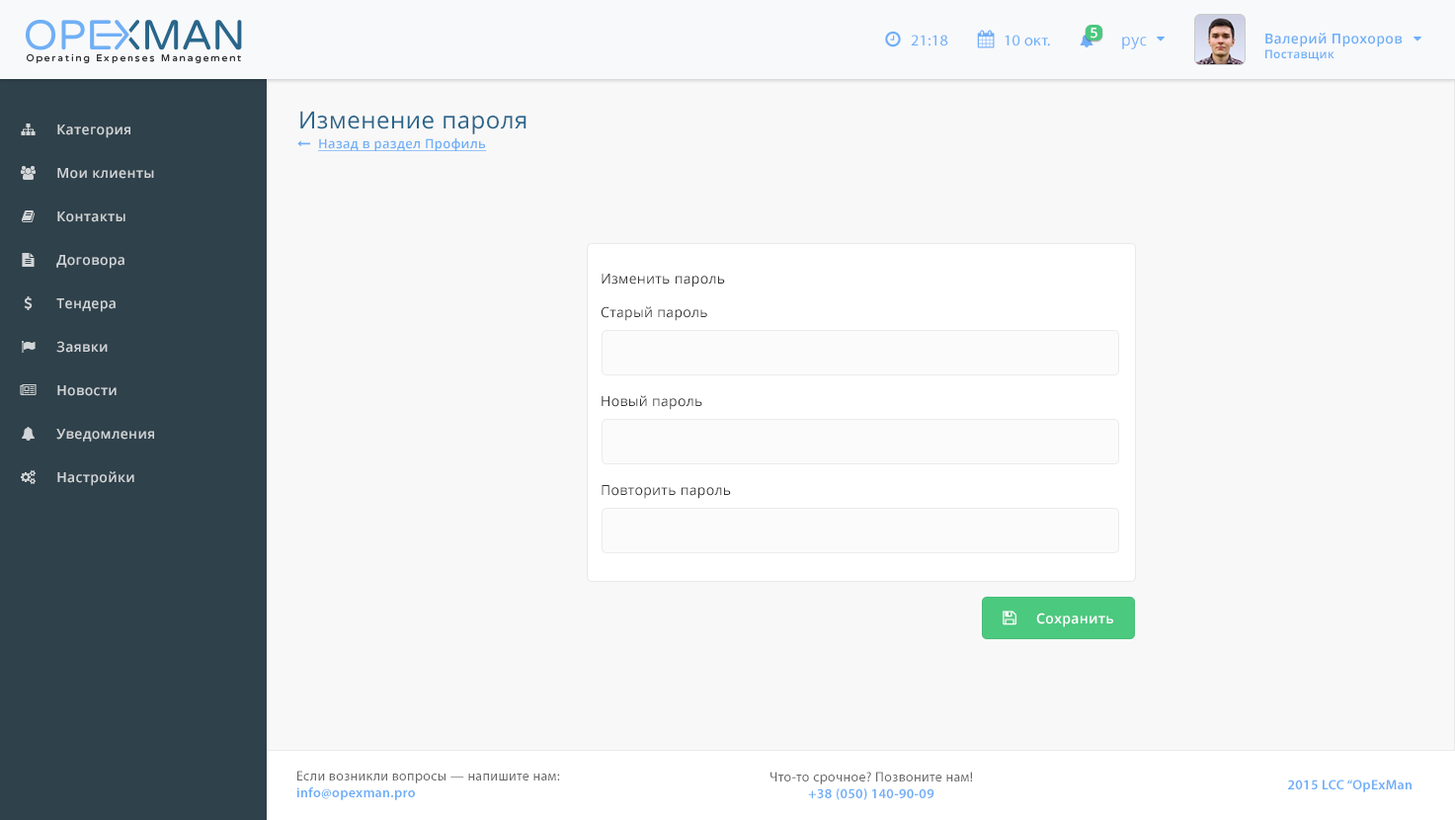
<style>
.page{position:relative;width:1455px;height:820px;background:#f8f8f8}
.page>*{position:absolute;margin:0}
.t1{font:13.8px "OpenSans-Semibold";letter-spacing:0.025em;color:#ffffff}
.t2{font:15.7px "MyriadPro-Regular";letter-spacing:0.025em;color:#6faff8}
.t3{font:15.7px "OpenSans";letter-spacing:0.025em;color:#6eaff8}
.t4{font:13.8px "OpenSans-Semibold";letter-spacing:0.025em;color:#6eaef7}
.t5{font:11.8px "OpenSans-Semibold";letter-spacing:0.025em;color:#6eaef7}
.t6{font:23.6px "OpenSans";letter-spacing:0.025em;color:#29658b}
.t7{font:13.8px "OpenSans-Semibold";letter-spacing:0.025em;color:#d2d5d7}
.t8{font:12.8px "OpenSans-Semibold";letter-spacing:0.025em;color:#6faff8;text-decoration:underline}
.t9{font:13.8px "OpenSans";letter-spacing:0.025em;color:#333333}
.t10{font:13.8px "MyriadPro-Regular";letter-spacing:0.025em;color:#696969}
.t11{font:13.8px "MyriadPro-Semibold";letter-spacing:0.025em;color:#6eaef8}
</style>
<div class="page">
<p class="t1" style="left:1090px;top:28px;width:7px;height:11px">5</p>
<p class="t2" style="left:911px;top:35px;width:37px;height:11px">21:18</p>
<p class="t2" style="left:1004px;top:35px;width:46px;height:11px">10 окт.</p>
<p class="t3" style="left:1122px;top:37px;width:25px;height:12px">рус</p>
<p class="t4" style="left:1265px;top:33px;width:137px;height:28px">Валерий Прохоров<br><span class="t5">Поставщик</span></p>
<p class="t6" style="left:300px;top:111px;width:226px;height:23px">Изменение пароля</p>
<p class="t7" style="left:57px;top:124px;width:73px;height:14px">Категория</p>
<p class="t8" style="left:318px;top:138px;width:169px;height:13px">Назад в раздел Профиль</p>
<p class="t7" style="left:57px;top:168px;width:97px;height:11px">Мои клиенты</p>
<p class="t7" style="left:57px;top:211px;width:68px;height:11px">Контакты</p>
<p class="t7" style="left:56px;top:255px;width:68px;height:14px">Договора</p>
<p class="t9" style="left:601px;top:274px;width:124px;height:13px">Изменить пароль</p>
<p class="t7" style="left:56px;top:298px;width:60px;height:14px">Тендера</p>
<p class="t9" style="left:600px;top:306px;width:107px;height:15px">Старый пароль</p>
<p class="t7" style="left:56px;top:341px;width:52px;height:12px">Заявки</p>
<p class="t7" style="left:57px;top:385px;width:60px;height:11px">Новости</p>
<p class="t9" style="left:601px;top:395px;width:101px;height:15px">Новый пароль</p>
<p class="t7" style="left:56px;top:429px;width:98px;height:12px">Уведомления</p>
<p class="t7" style="left:57px;top:471px;width:77px;height:15px">Настройки</p>
<p class="t9" style="left:601px;top:485px;width:130px;height:14px">Повторить пароль</p>
<p class="t1" style="left:1036px;top:612px;width:77px;height:15px">Сохранить</p>
<p class="t10" style="left:296px;top:770px;width:264px;height:30px">Если возникли вопросы — напишите нам:<br><span class="t11">info@opexman.pro</span></p>
<p class="t10" style="left:770px;top:771px;width:203px;height:29px;text-align:center">Что-то срочное? Позвоните нам!<br><span class="t11">+38 (050) 140-90-09</span></p>
<p class="t11" style="left:1288px;top:779px;width:123px;height:13px">2015 LCC “OpExMan</p>
</div>
